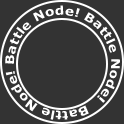
<style>
.page{position:relative;width:124px;height:124px;background:#333333}
.page>*{position:absolute;margin:0}
.t1{font:12px "Verdana-Bold";color:#ffffff;scale:1.13 1}
</style>
<div class="page">
<p class="t1" style="left:5px;top:5px;width:115px;height:115px;text-align:center">Battle Node! Battle Node! Battle Node! Battle Node!</p>
</div>
